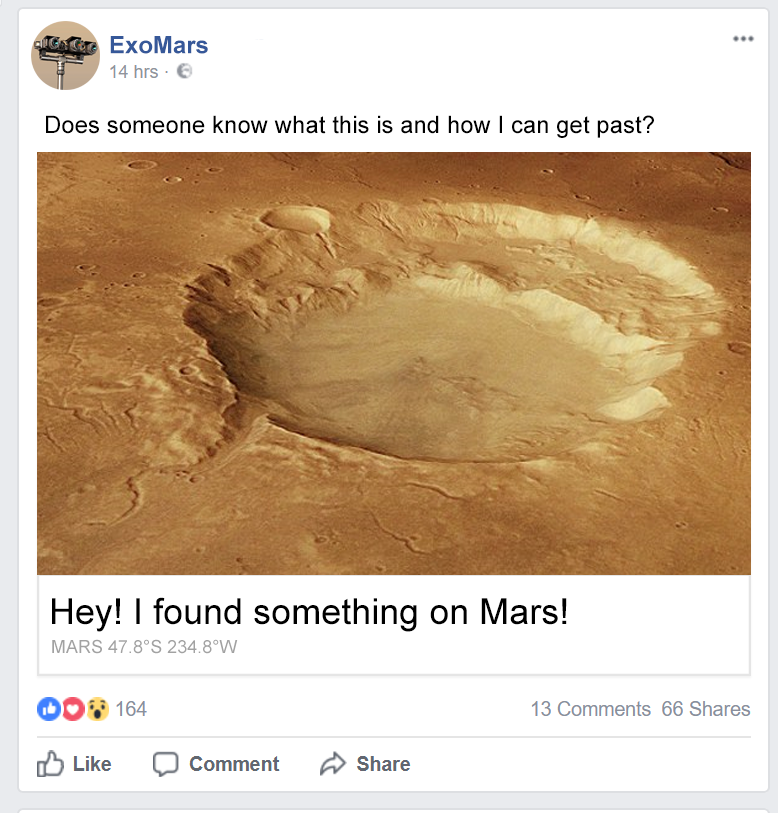
<style>
.page{position:relative;width:778px;height:813px;background:#ffffff}
.page>*{position:absolute;margin:0}
.t1{font:24px "Arial-BoldMT";color:#365899}
.t2{font:24px "ArialMT";color:#000000}
.t3{font:36px "ArialMT";color:#000000}
.t4{font:18px "ArialMT";color:#a2a2a2}
</style>
<div class="page">
<p class="t1" style="left:110px;top:36px;width:98px;height:18px">ExoMars</p>
<p class="t2" style="left:46px;top:115px;width:608px;height:23px">Does someone know what this is and how I can get past?</p>
<p class="t3" style="left:52px;top:597px;width:515px;height:35px">Hey! I found something on Mars!</p>
<p class="t4" style="left:52px;top:639px;width:186px;height:15px">MARS 47.8°S 234.8°W</p>
</div>
